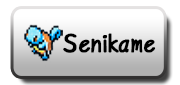
<style>
.page{position:relative;width:180px;height:85px;background:#ffffff}
.page>*{position:absolute;margin:0}
.t1{font:32.6px "WRTishKid";letter-spacing:-0.025em;color:#000000;font-weight:bold}
</style>
<div class="page">
<p class="t1" style="left:63px;top:33px;width:93px;height:20px">Senikame</p>
</div>
